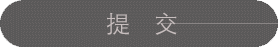
<style>
.page{position:relative;width:278px;height:47px;background:#5a5959}
.page>*{position:absolute;margin:0}
.t1{font:24px "STXihei";color:#c7bebe}
</style>
<div class="page">
<p class="t1" style="left:106px;top:12px;width:71px;height:23px">提    交</p>
</div>
